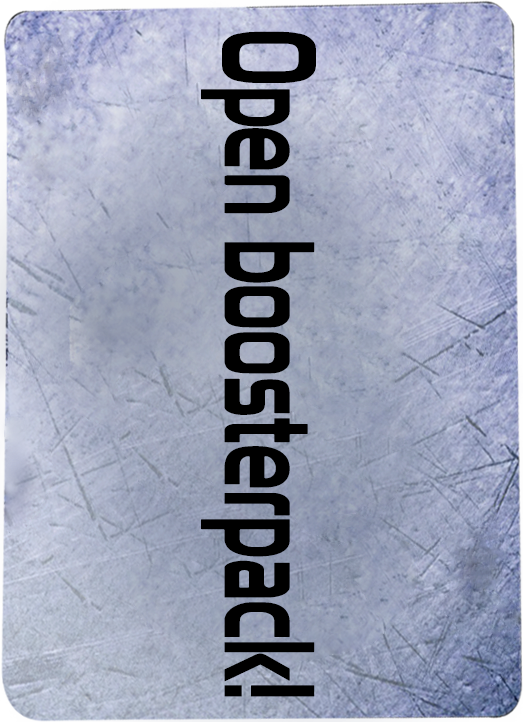
<style>
.page{position:relative;width:523px;height:722px}
.page>*{position:absolute;margin:0}
.t1{font:125px "Prototype";color:#000000;scale:0.64 1}
</style>
<div class="page">
<p class="t1" style="left:201px;top:31px;width:115px;height:666px;rotate:90deg">Open boosterpack!</p>
</div>
